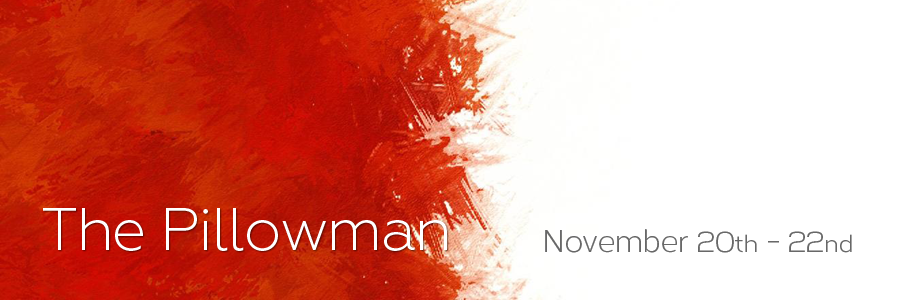
<style>
.page{position:relative;width:900px;height:300px;background:#ffffff}
.page>*{position:absolute;margin:0}
.t1{font:60px "Geometria-Light";letter-spacing:-0.02em;color:#ffffff}
.t2{font:30px "Corbert-Regular";letter-spacing:-0.02em;color:#686868}
.t3{font:24px "Corbert-Regular";letter-spacing:-0.02em;color:#686868}
</style>
<div class="page">
<p class="t1" style="left:43px;top:208px;width:404px;height:43px">The Pillowman</p>
<p class="t2" style="left:545px;top:229px;width:307px;height:24px">November 20<span class="t3">th</span> - 22<span class="t3">nd</span></p>
</div>
